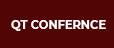
<style>
.page{position:relative;width:114px;height:48px;background:#520505}
.page>*{position:absolute;margin:0}
.t1{font:11.6px "Montserrat-Bold";color:#ffffff}
</style>
<div class="page">
<p class="t1" style="left:11px;top:20px;width:95px;height:11px">QT CONFERNCE</p>
</div>
